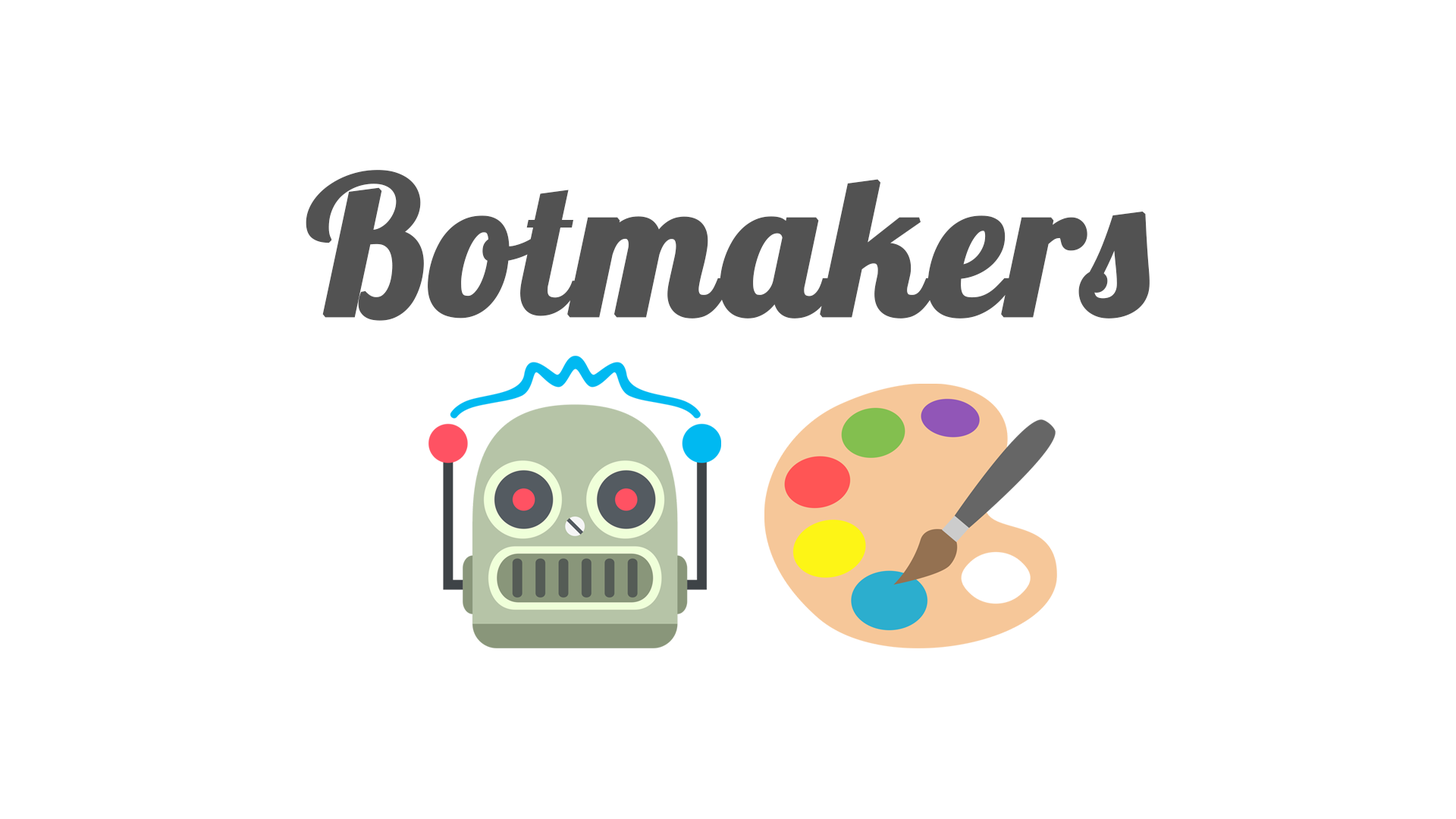
<style>
.page{position:relative;width:1456px;height:819px;background:#ffffff}
.page>*{position:absolute;margin:0}
.t1{font:189.6px "Lobster-Regular";color:#525252;font-weight:bold}
</style>
<div class="page">
<p class="t1" style="left:306px;top:170px;width:844px;height:151px">Botmakers</p>
</div>
